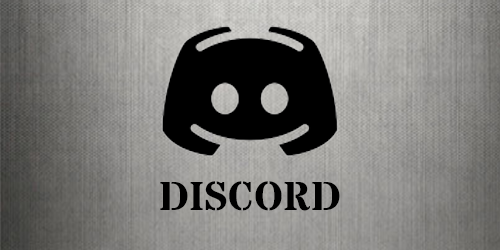
<style>
.page{position:relative;width:500px;height:250px}
.page>*{position:absolute;margin:0}
.t1{font:40.5px "StardosStencil-Bold";color:#000000}
</style>
<div class="page">
<p class="t1" style="left:160px;top:181px;width:180px;height:30px">DISCORD</p>
</div>
